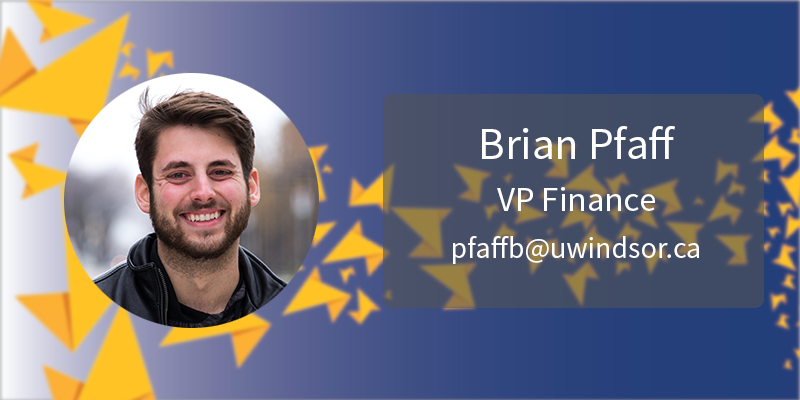
<style>
.page{position:relative;width:800px;height:400px}
.page>*{position:absolute;margin:0}
.t1{font:45px "SourceSansPro-Regular";color:#ffffff}
.t2{font:35px "SourceSansPro-Regular";color:#ffffff}
.t3{font:30px "SourceSansPro-Regular";color:#ffffff}
</style>
<div class="page">
<p class="t1" style="left:482px;top:126px;width:193px;height:33px">Brian Pfaff</p>
<p class="t2" style="left:497px;top:187px;width:158px;height:24px">VP Finance</p>
<p class="t3" style="left:453px;top:236px;width:246px;height:28px">pfaffb@uwindsor.ca</p>
</div>
